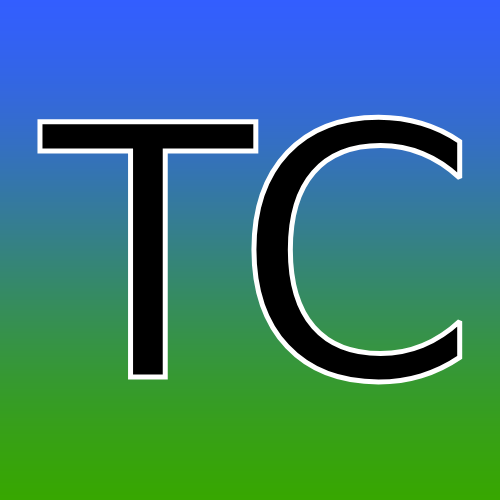
<style>
.page{position:relative;width:500px;height:500px}
.page>*{position:absolute;margin:0}
.t1{font:350px "DejaVuSans";color:#000000}
</style>
<div class="page">
<p class="t1" style="left:36px;top:114px;width:427px;height:271px">TC</p>
</div>
